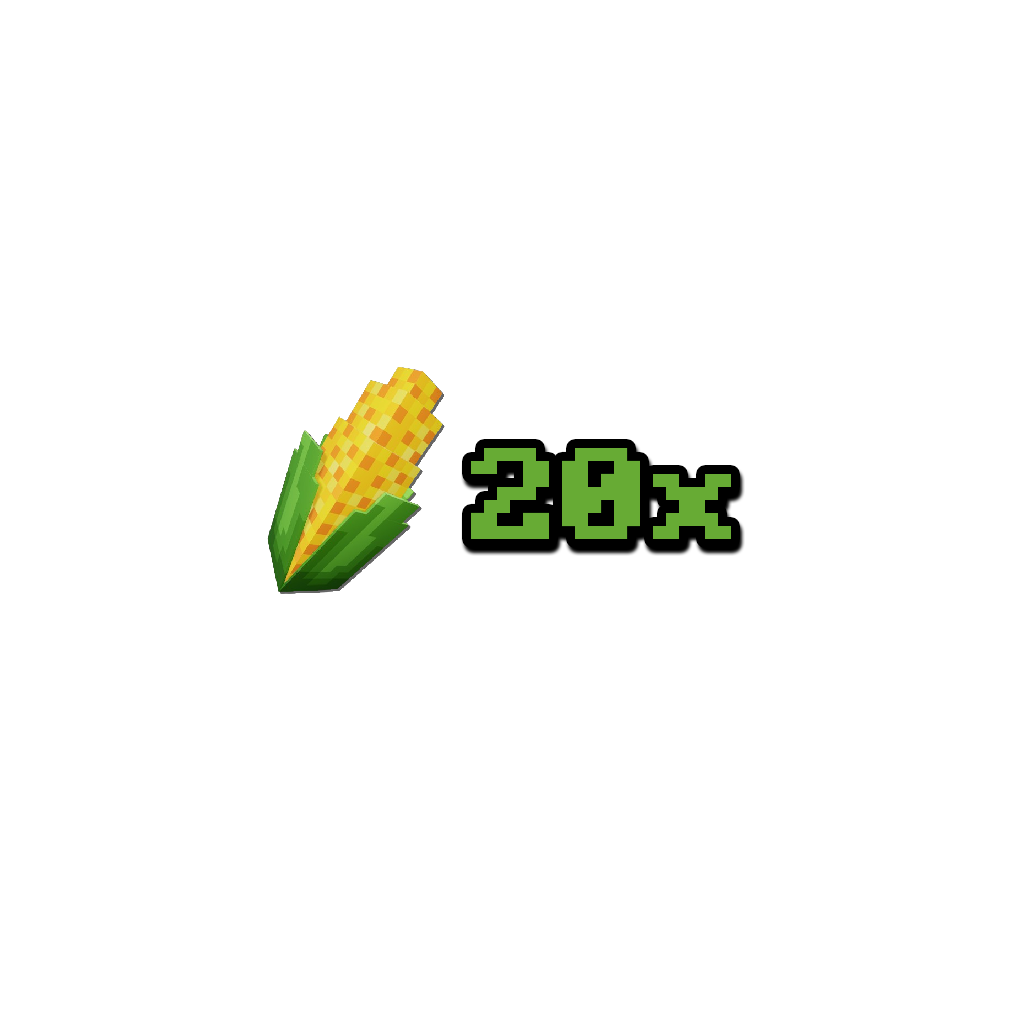
<style>
.page{position:relative;width:1024px;height:1024px;background:#ffffff}
.page>*{position:absolute;margin:0}
.t1{font:130px "Minecraft-Bold";color:#67ab34}
</style>
<div class="page">
<p class="t1" style="left:471px;top:448px;width:260px;height:91px">20x</p>
</div>
